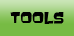
<style>
.page{position:relative;width:74px;height:36px;background:#77bb44}
.page>*{position:absolute;margin:0}
.t1{font:14px "Baveuse";color:#000000}
</style>
<div class="page">
<p class="t1" style="left:10px;top:12px;width:54px;height:12px">Tools</p>
</div>
